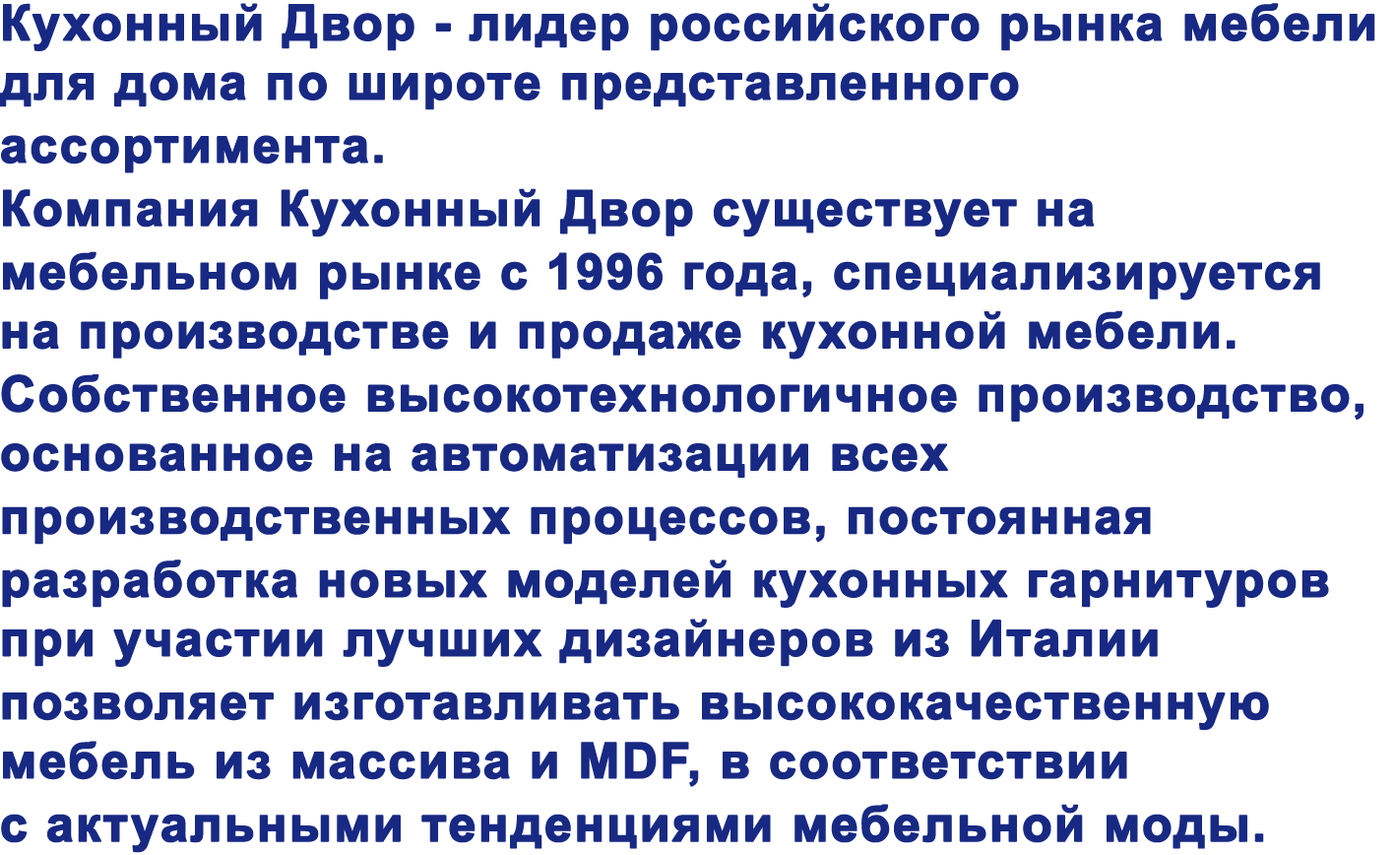
<style>
.page{position:relative;width:1395px;height:855px;background:#ffffff}
.page>*{position:absolute;margin:0}
.t1{font:49.2px "Arial-BoldMT";letter-spacing:0.025em;color:#182983;font-weight:bold}
</style>
<div class="page">
<p class="t1" style="left:0px;top:3px;width:1376px;height:850px">Кухонный Двор - лидер российского рынка мебели для дома по широте представленного <br>ассортимента. <br>Компания Кухонный Двор существует на <br>мебельном рынке с 1996 года, специализируется на производстве и продаже кухонной мебели. <br>Собственное высокотехнологичное производство, основанное на автоматизации всех <br>производственных процессов, постоянная <br>разработка новых моделей кухонных гарнитуров при участии лучших дизайнеров из Италии <br>позволяет изготавливать высококачественную мебель из массива и MDF, в соответствии <br>с актуальными тенденциями мебельной моды.</p>
</div>
